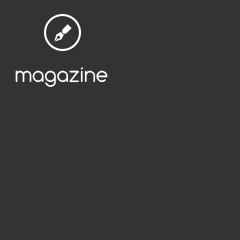
<style>
.page{position:relative;width:240px;height:240px;background:#333333}
.page>*{position:absolute;margin:0}
.t1{font:20.4px "Comfortaa-Regular";color:#ffffff;scale:0.96 1}
</style>
<div class="page">
<p class="t1" style="left:15px;top:67px;width:93px;height:20px">magazine</p>
</div>
